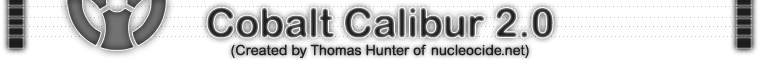
<style>
.page{position:relative;width:760px;height:60px;background:#ffffff}
.page>*{position:absolute;margin:0}
.t1{font:40px "ArialRoundedMTBold"}
.t2{font:14px "ArialRoundedMT";color:#1d1d1d}
</style>
<div class="page">
<p class="t1" style="left:207px;top:7px;width:346px;height:31px">Cobalt Calibur 2.0</p>
<p class="t2" style="left:231px;top:44px;width:298px;height:14px">(Created by Thomas Hunter of nucleocide.net)</p>
</div>
